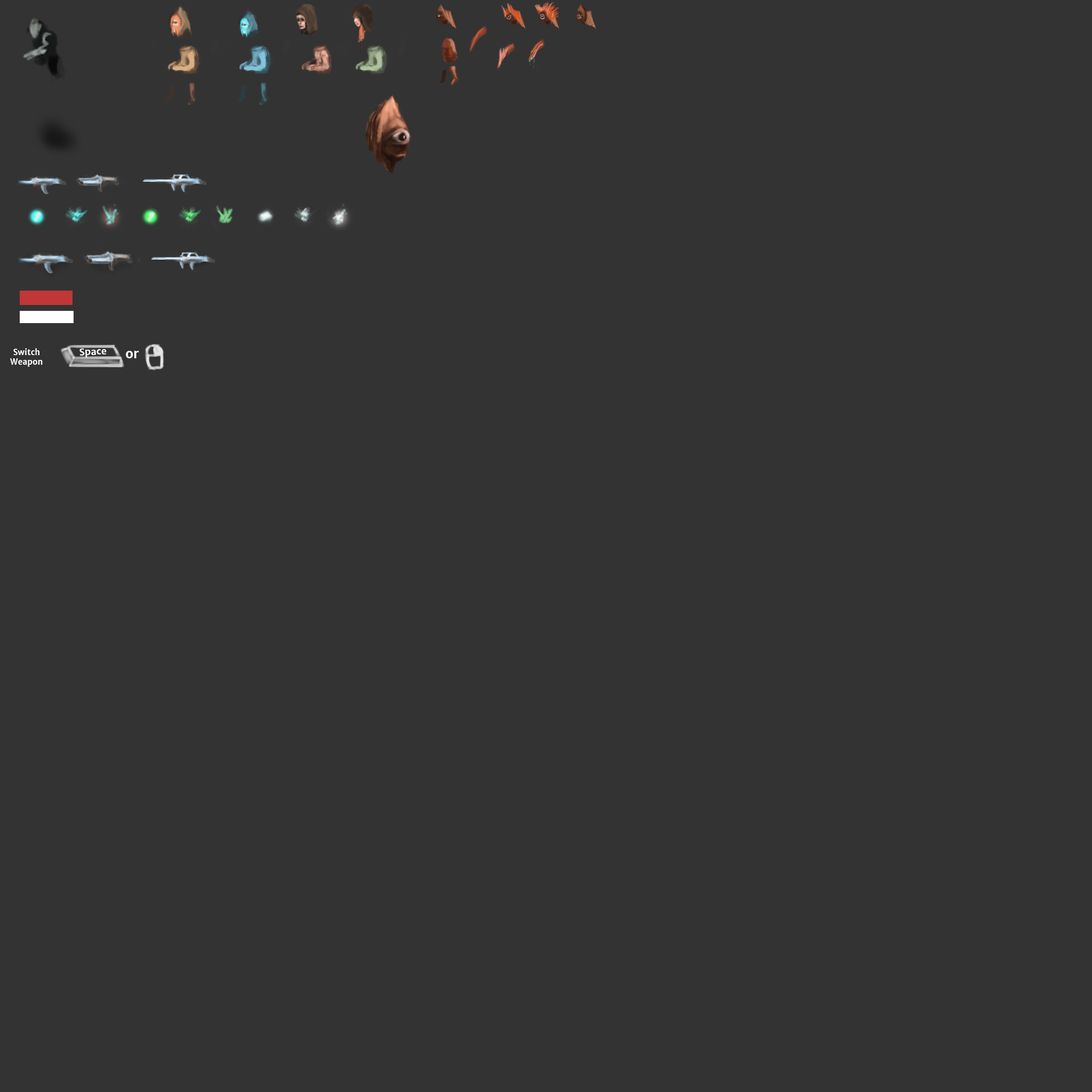
<style>
.page{position:relative;width:1092px;height:1092px;background:#333333}
.page>*{position:absolute;margin:0}
.t1{font:8px "MerriweatherSans-Bold";color:#ffffff}
.t2{font:9.4px "MerriweatherSans-Bold";color:#ffffff}
.t3{font:12.8px "MerriweatherSans-Bold";color:#ffffff}
</style>
<div class="page">
<p class="t1" style="left:10px;top:348px;width:33px;height:19px;text-align:center">Switch <br>Weapon</p>
<p class="t2" style="left:79px;top:348px;width:28px;height:10px;rotate:-3deg">Space</p>
<p class="t3" style="left:126px;top:351px;width:13px;height:7px">or</p>
</div>
